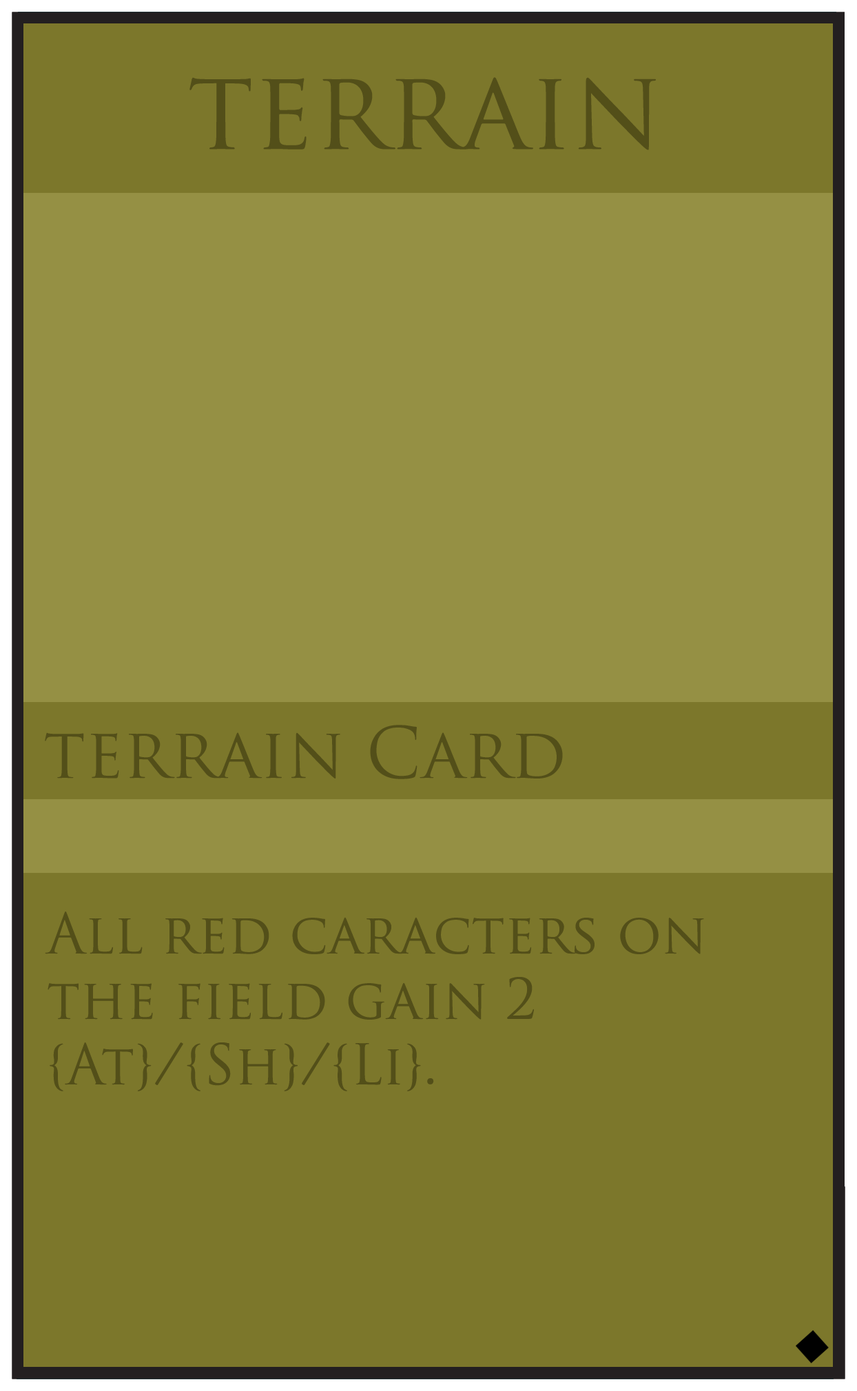
<style>
.page{position:relative;width:857px;height:1391px;background:#7c772b}
.page>*{position:absolute;margin:0}
.t1{font:109.1px "TrajanPro-Regular";color:#534f19}
.t2{font:68.9px "TrajanPro-Regular";color:#534f19}
.t3{font:54.5px "TrajanPro-Regular";color:#534f19}
</style>
<div class="page">
<p class="t1" style="left:189px;top:77px;width:467px;height:73px">terrain</p>
<p class="t2" style="left:45px;top:725px;width:518px;height:54px">terrain Card</p>
<p class="t3" style="left:45px;top:912px;width:659px;height:179px">All red caracters on <br>the field gain 2 <br>{At}/{Sh}/{Li}.</p>
</div>
